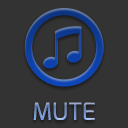
<style>
.page{position:relative;width:128px;height:128px;background:#333333}
.page>*{position:absolute;margin:0}
.t1{font:24px "Exo-Medium";text-transform:uppercase}
</style>
<div class="page">
<p class="t1" style="left:33px;top:102px;width:62px;height:18px">Mute</p>
</div>
